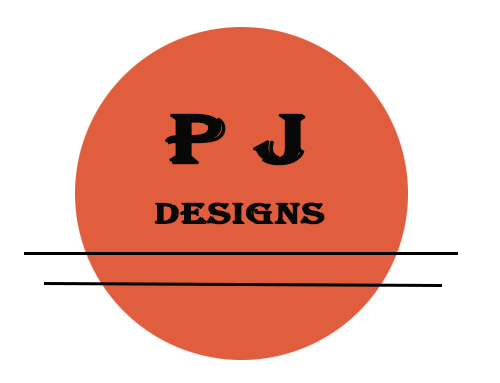
<style>
.page{position:relative;width:500px;height:383px;background:#ffffff}
.page>*{position:absolute;margin:0}
.t1{font:72px "Algerian";color:#080808;font-weight:bold;scale:1.39 1}
.t2{font:30px "Algerian";color:#080808;font-weight:bold;scale:1.39 1}
</style>
<div class="page">
<p class="t1" style="left:164px;top:113px;width:142px;height:53px">p j</p>
<p class="t2" style="left:154px;top:202px;width:171px;height:23px">Designs</p>
</div>
